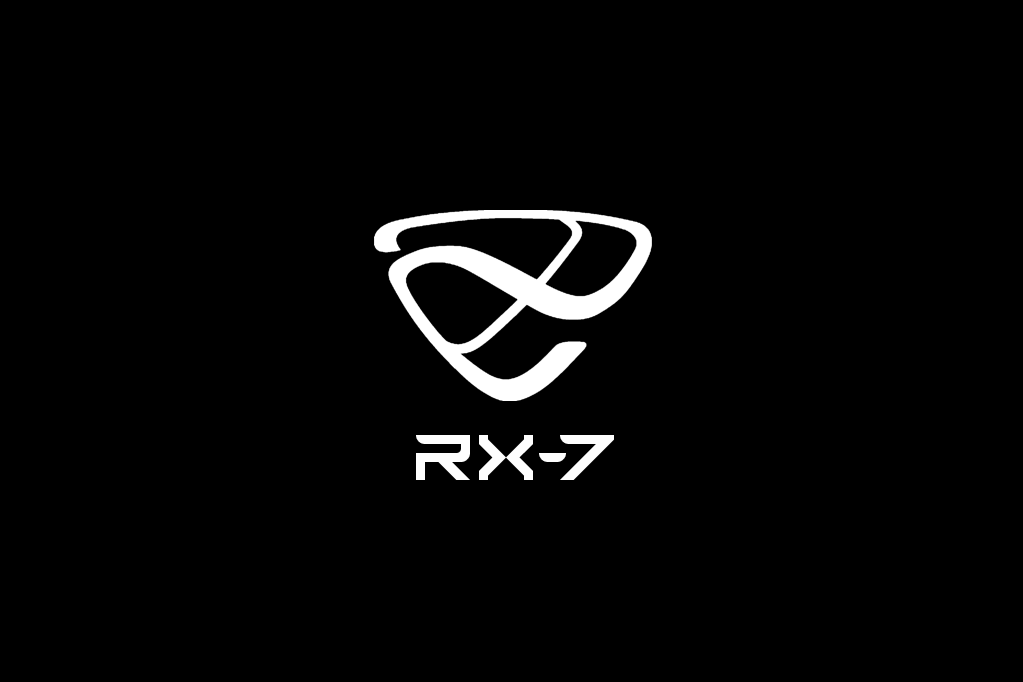
<style>
.page{position:relative;width:1023px;height:682px;background:#000000}
.page>*{position:absolute;margin:0}
.t1{font:72px "TESLA";color:#fefefe}
</style>
<div class="page">
<p class="t1" style="left:416px;top:435px;width:117px;height:45px">RX</p>
<p class="t1" style="left:560px;top:435px;width:54px;height:45px">7</p>
<p class="t1" style="left:539px;top:453px;width:27px;height:9px">-</p>
</div>
